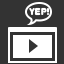
<style>
.page{position:relative;width:64px;height:64px;background:#333333}
.page>*{position:absolute;margin:0}
.t1{font:10px "Junegull-Regular";color:#ffffff}
</style>
<div class="page">
<p class="t1" style="left:29px;top:7px;width:21px;height:9px">yep!</p>
</div>
